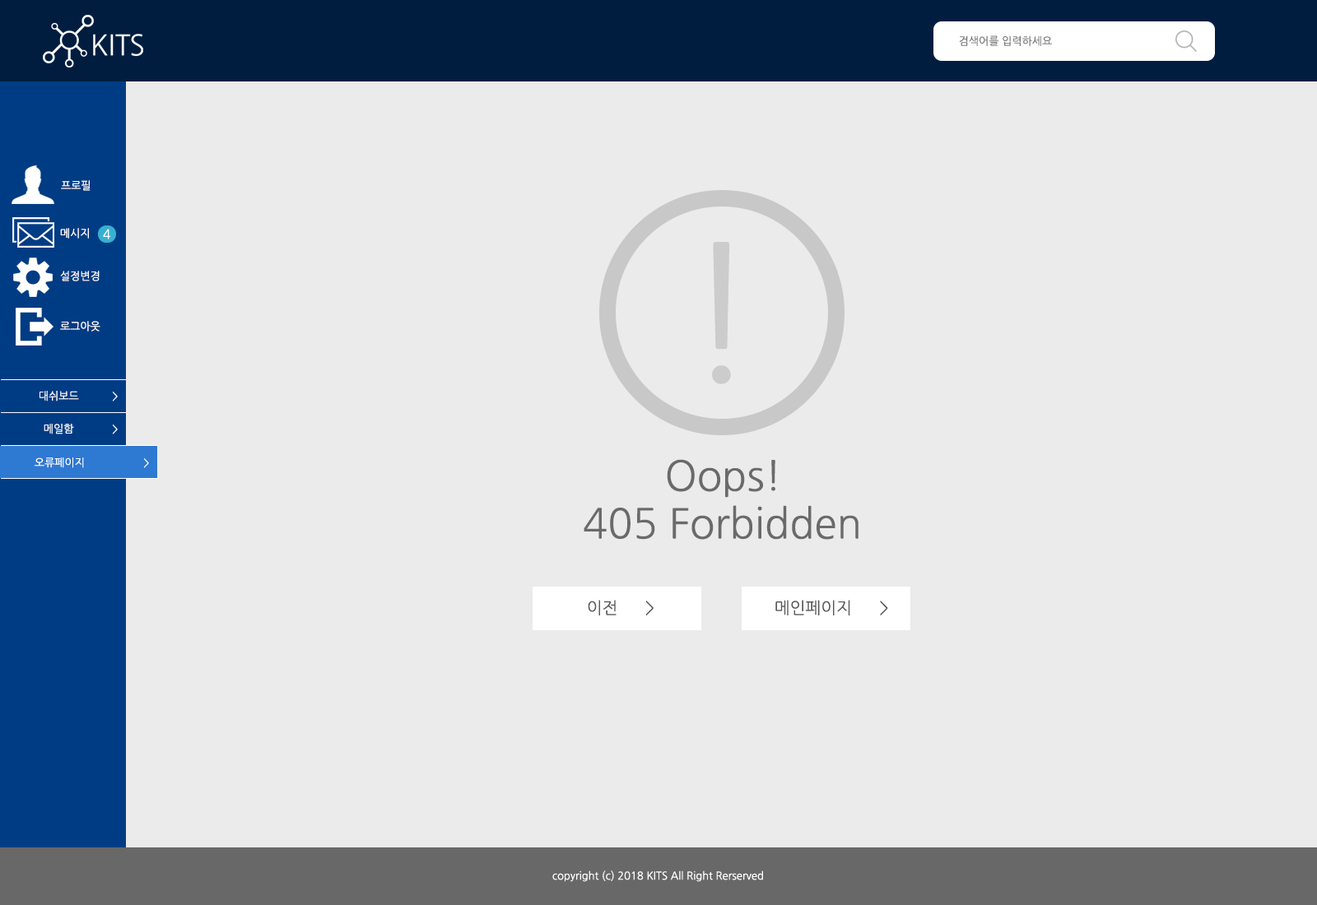
<style>
.page{position:relative;width:1317px;height:905px;background:#ebebeb}
.page>*{position:absolute;margin:0}
.t1{font:10.7px "NanumGothic";color:#737373}
.t2{font:10.7px "NanumGothic";color:#ffffff}
.t3{font:12.8px "NanumGothic";color:#ffffff}
.t4{font:189.3px "NanumGothic";color:#cccccc}
.t5{font:41.2px "NanumGothic";color:#6a6a6a}
.t6{font:16.5px "NanumGothic";color:#585858}
</style>
<div class="page">
<p class="t1" style="left:959px;top:35px;width:93px;height:11px">검색어를 입력하세요</p>
<p class="t2" style="left:61px;top:180px;width:30px;height:11px">프로필</p>
<p class="t2" style="left:60px;top:228px;width:29px;height:11px">메시지</p>
<p class="t3" style="left:103px;top:229px;width:7px;height:11px">4</p>
<p class="t4" style="left:712px;top:242px;width:19px;height:142px">!</p>
<p class="t2" style="left:60px;top:271px;width:40px;height:11px">설정변경</p>
<p class="t2" style="left:60px;top:321px;width:40px;height:11px">로그아웃</p>
<p class="t2" style="left:40px;top:391px;width:39px;height:11px">대쉬보드</p>
<p class="t2" style="left:113px;top:391px;width:5px;height:11px">&gt;</p>
<p class="t2" style="left:44px;top:424px;width:30px;height:11px">메일함</p>
<p class="t2" style="left:113px;top:424px;width:5px;height:11px">&gt;</p>
<p class="t2" style="left:35px;top:458px;width:49px;height:10px">오류페이지</p>
<p class="t2" style="left:144px;top:458px;width:5px;height:10px">&gt;</p>
<p class="t5" style="left:667px;top:459px;width:108px;height:39px">Oops!</p>
<p class="t5" style="left:584px;top:505px;width:275px;height:35px">405 Forbidden</p>
<p class="t6" style="left:588px;top:600px;width:66px;height:17px">이전      &gt;</p>
<p class="t6" style="left:775px;top:600px;width:113px;height:17px">메인페이지      &gt;</p>
<p class="t2" style="left:552px;top:871px;width:211px;height:11px">copyright (c) 2018 KITS All Right Rerserved</p>
</div>
